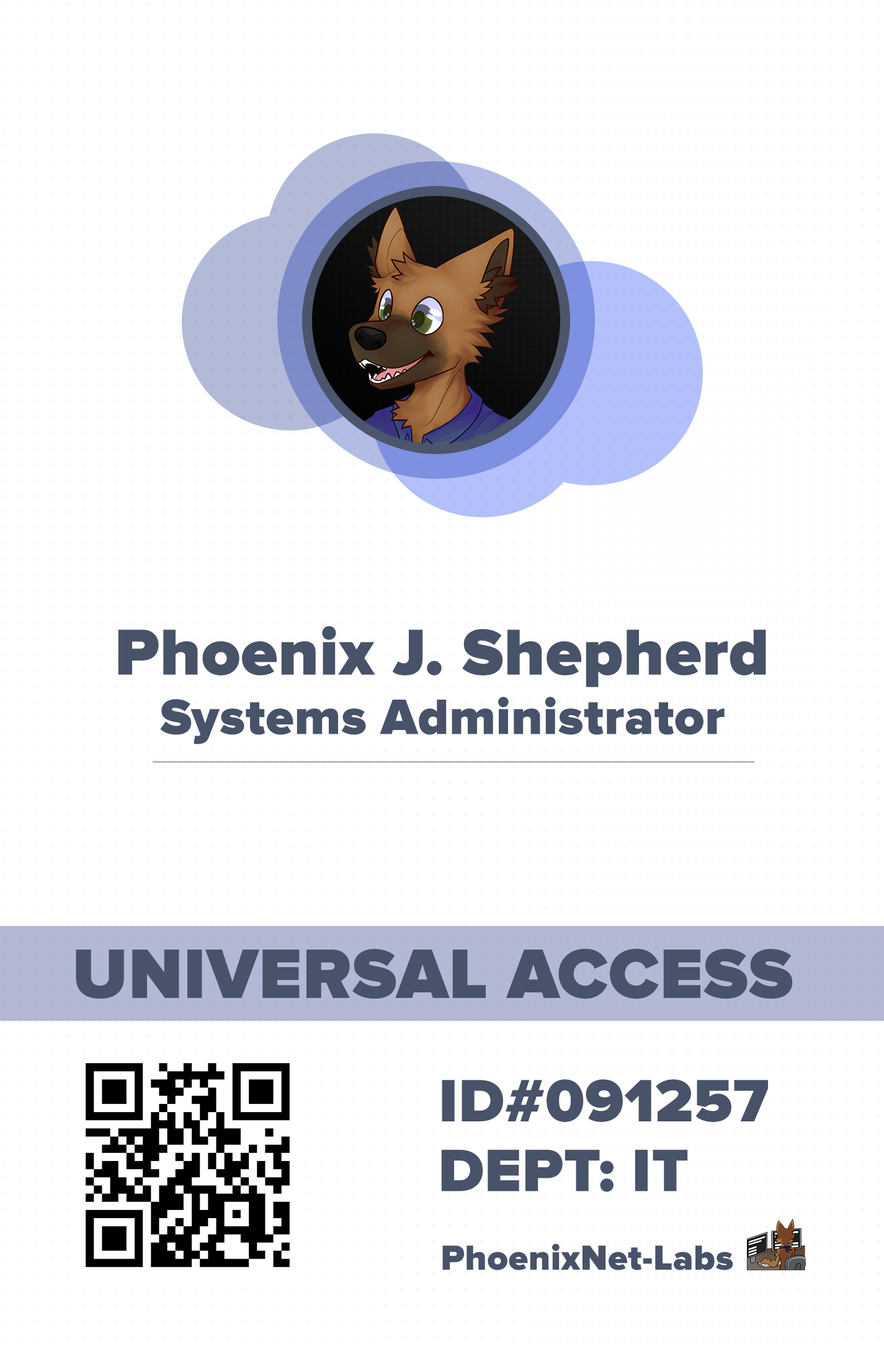
<style>
.page{position:relative;width:884px;height:1349px;background:#ffffff}
.page>*{position:absolute;margin:0}
.t1{font:67.2px "ProximaNova-Black";letter-spacing:0.01em;color:#485268}
.t2{font:51.7px "ProximaNova-Black";letter-spacing:0.01em;color:#485268}
.t3{font:72.4px "ProximaNova-Black";letter-spacing:0.01em;color:#485268}
.t4{font:62px "ProximaNova-Black";letter-spacing:0.01em;color:#485268}
.t5{font:36.2px "ProximaNova-Black";letter-spacing:0.01em;color:#485268}
</style>
<div class="page">
<p class="t1" style="left:118px;top:626px;width:648px;height:61px">Phoenix J. Shepherd</p>
<p class="t2" style="left:160px;top:697px;width:564px;height:47px">Systems Administrator</p>
<p class="t3" style="left:76px;top:948px;width:717px;height:51px">UNIVERSAL ACCESS</p>
<p class="t4" style="left:442px;top:1079px;width:326px;height:43px">ID#091257</p>
<p class="t4" style="left:441px;top:1149px;width:247px;height:43px">DEPT: IT</p>
<p class="t5" style="left:442px;top:1244px;width:291px;height:26px">PhoenixNet-Labs</p>
</div>
